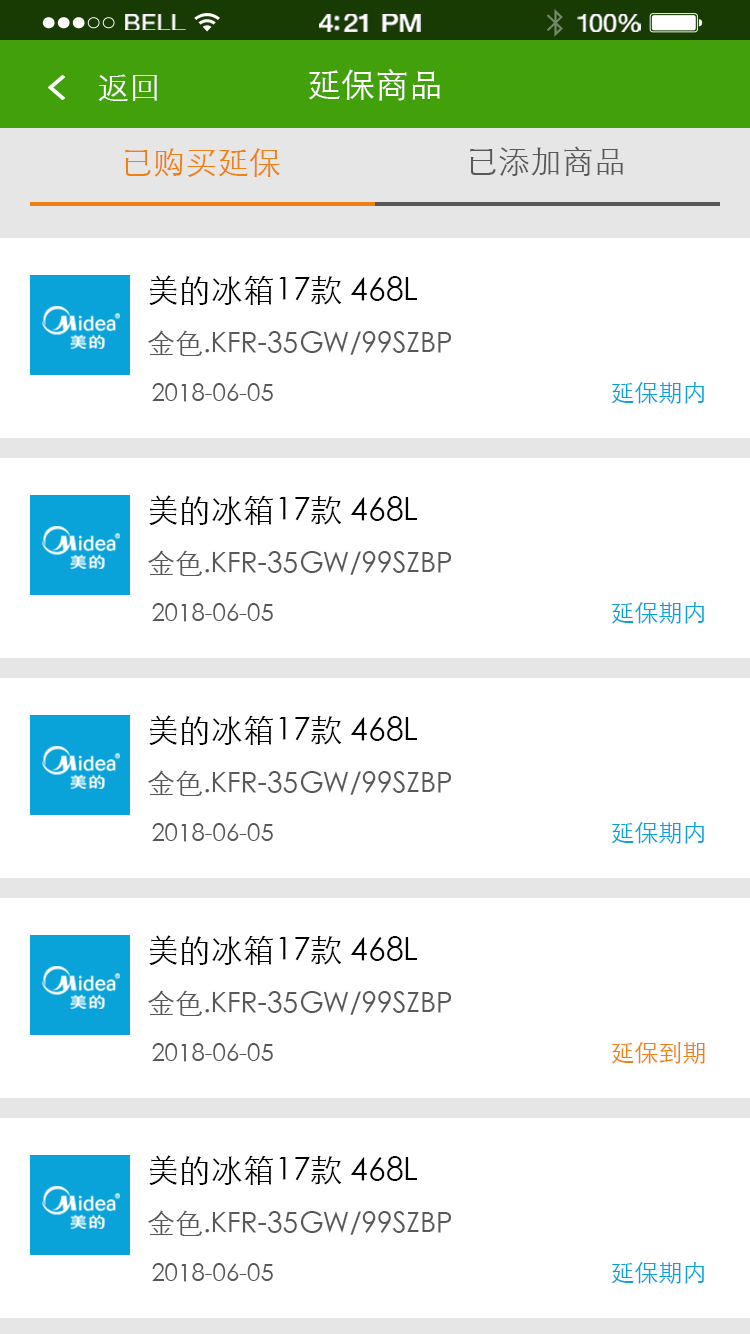
<style>
.page{position:relative;width:750px;height:1334px;background:#ffffff}
.page>*{position:absolute;margin:0}
.t1{font:23.3px "HelveticaNeue";letter-spacing:0.02em;color:#ffffff;scale:1.06 1}
.t2{font:25.3px "HelveticaNeue-Medium";letter-spacing:-0.02em;color:#ffffff;scale:1.06 1}
.t3{font:24.3px "HelveticaNeue";letter-spacing:-0.02em;color:#ffffff;scale:1.06 1}
.t4{font:32px "STXihei";color:#ffffff}
.t5{font:34px "STXihei";color:#ffffff}
.t6{font:32px "STXihei";color:#ef8014}
.t7{font:32px "STXihei";color:#595757}
.t8{font:28px/56px "STXihei";color:#595757}
.t9{font:32px/56px "STXihei";color:#000000}
.t10{font:24px "STXihei";color:#595757}
.t11{font:24px "STXihei";color:#09a3d9}
.t12{font:24px "STXihei";color:#ef8013}
</style>
<div class="page">
<p class="t1" style="left:125px;top:14px;width:61px;height:16px">BELL</p>
<p class="t2" style="left:319px;top:14px;width:102px;height:18px">4:21 PM</p>
<p class="t3" style="left:577px;top:14px;width:64px;height:18px">100%</p>
<p class="t4" style="left:98px;top:74px;width:59px;height:27px">返回</p>
<p class="t5" style="left:308px;top:69px;width:132px;height:32px">延保商品</p>
<p class="t6" style="left:125px;top:148px;width:155px;height:29px">已购买延保</p>
<p class="t7" style="left:470px;top:146px;width:153px;height:30px">已添加商品</p>
<p class="t8" style="left:148px;top:275px;width:304px;height:81px"><span class="t9">美的冰箱17款 468L <br></span>金色.KFR-35GW/99SZBP</p>
<p class="t10" style="left:152px;top:383px;width:121px;height:19px">2018-06-05</p>
<p class="t11" style="left:611px;top:382px;width:93px;height:22px">延保期内</p>
<p class="t8" style="left:148px;top:495px;width:304px;height:81px"><span class="t9">美的冰箱17款 468L <br></span>金色.KFR-35GW/99SZBP</p>
<p class="t10" style="left:152px;top:603px;width:121px;height:19px">2018-06-05</p>
<p class="t11" style="left:611px;top:602px;width:93px;height:22px">延保期内</p>
<p class="t8" style="left:148px;top:715px;width:304px;height:81px"><span class="t9">美的冰箱17款 468L <br></span>金色.KFR-35GW/99SZBP</p>
<p class="t11" style="left:611px;top:822px;width:93px;height:22px">延保期内</p>
<p class="t10" style="left:152px;top:823px;width:121px;height:19px">2018-06-05</p>
<p class="t8" style="left:148px;top:935px;width:304px;height:81px"><span class="t9">美的冰箱17款 468L <br></span>金色.KFR-35GW/99SZBP</p>
<p class="t10" style="left:152px;top:1043px;width:121px;height:19px">2018-06-05</p>
<p class="t12" style="left:611px;top:1042px;width:94px;height:22px">延保到期</p>
<p class="t8" style="left:148px;top:1155px;width:304px;height:81px"><span class="t9">美的冰箱17款 468L <br></span>金色.KFR-35GW/99SZBP</p>
<p class="t10" style="left:152px;top:1263px;width:121px;height:19px">2018-06-05</p>
<p class="t11" style="left:611px;top:1262px;width:93px;height:22px">延保期内</p>
</div>
